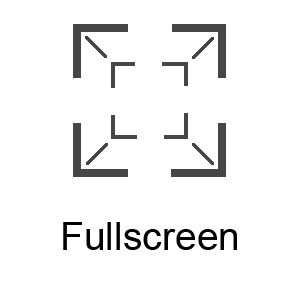
<style>
.page{position:relative;width:300px;height:300px;background:#ffffff}
.page>*{position:absolute;margin:0}
.t1{font:39.1px "ArialMT";color:#000000}
</style>
<div class="page">
<p class="t1" style="left:63px;top:222px;width:174px;height:28px">Fullscreen</p>
</div>
